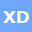
<style>
.page{position:relative;width:32px;height:32px;background:#6fa6f7}
.page>*{position:absolute;margin:0}
.t1{font:16.7px "Verdana-Bold";color:#ffffff}
</style>
<div class="page">
<p class="t1" style="left:3px;top:11px;width:26px;height:12px">XD</p>
</div>
